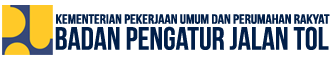
<style>
.page{position:relative;width:332px;height:60px;background:#ffffff}
.page>*{position:absolute;margin:0}
.t1{font:13.1px "BebasNeue";color:#001e49;scale:1.18 1}
.t2{font:32.1px "BebasNeue";color:#001e49}
</style>
<div class="page">
<p class="t1" style="left:56px;top:14px;width:274px;height:10px">KEMENTERIAN PEKERJAAN UMUM DAN PERUMAHAN RAKYAT</p>
<p class="t2" style="left:55px;top:26px;width:274px;height:24px">BADAN PENGATUR JALAN TOL</p>
</div>
